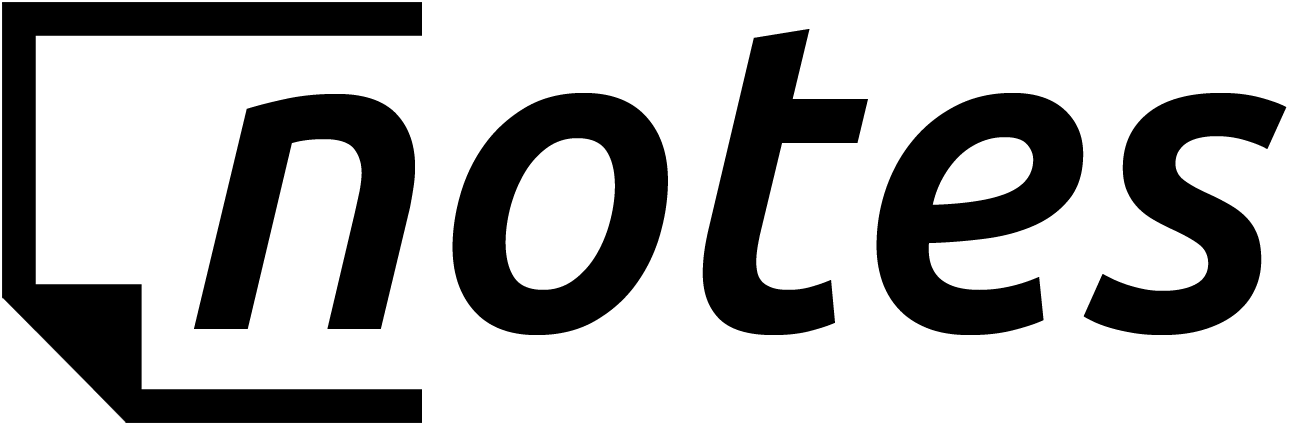
<style>
.page{position:relative;width:1300px;height:424px;background:#ffffff}
.page>*{position:absolute;margin:0}
.t1{font:440px "Ubuntu-MediumItalic";color:#000000}
</style>
<div class="page">
<p class="t1" style="left:194px;top:29px;width:1093px;height:306px">notes</p>
</div>
